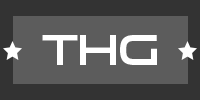
<style>
.page{position:relative;width:200px;height:100px;background:#5c5c5c}
.page>*{position:absolute;margin:0}
.t1{font:43.2px "Venera900";letter-spacing:-0.05em;color:#ffffff}
</style>
<div class="page">
<p class="t1" style="left:42px;top:35px;width:115px;height:30px">THG</p>
</div>
